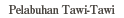
<style>
.page{position:relative;width:124px;height:18px;background:#ffffff}
.page>*{position:absolute;margin:0}
.t1{font:12px "RyuminPro-ExBold";letter-spacing:-0.04em;color:#4c4843;scale:0.9 1}
</style>
<div class="page">
<p class="t1" style="left:8px;top:5px;width:107px;height:9px">Pelabuhan Tawi-Tawi</p>
</div>
